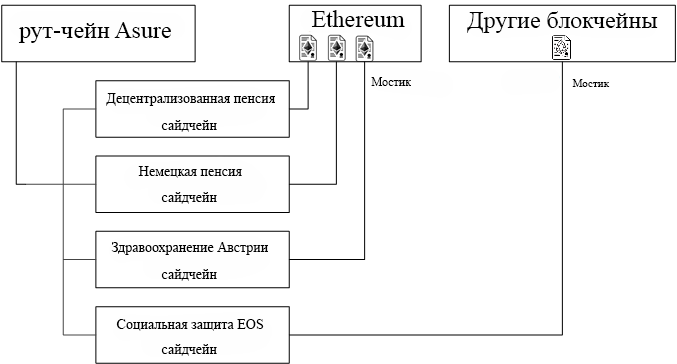
<style>
.page{position:relative;width:677px;height:364px;background:#ffffff}
.page>*{position:absolute;margin:0}
.t1{font:24px "TimesNewRomanPSMT";color:#000000}
.t2{font:12px "TimesNewRomanPSMT";color:#000000}
.t3{font:11px "TimesNewRomanPSMT";color:#000000}
.t4{font:14px "TimesNewRomanPSMT";color:#000000}
</style>
<div class="page">
<p class="t1" style="left:311px;top:10px;width:94px;height:17px">Ethereum</p>
<p class="t1" style="left:467px;top:11px;width:191px;height:22px">Другие блокчейны</p>
<p class="t1" style="left:18px;top:22px;width:153px;height:21px">рут-чейн Asure</p>
<p class="t2" style="left:371px;top:77px;width:40px;height:9px">Мостик</p>
<p class="t3" style="left:572px;top:79px;width:38px;height:8px">Мостик</p>
<p class="t4" style="left:106px;top:93px;width:169px;height:13px">Децентрализованная пенсия</p>
<p class="t4" style="left:161px;top:120px;width:56px;height:12px">сайдчейн</p>
<p class="t4" style="left:138px;top:166px;width:104px;height:12px">Немецкая пенсия</p>
<p class="t4" style="left:161px;top:192px;width:56px;height:12px">сайдчейн</p>
<p class="t4" style="left:111px;top:242px;width:157px;height:13px">Здравоохранение Австрии</p>
<p class="t4" style="left:161px;top:269px;width:56px;height:12px">сайдчейн</p>
<p class="t4" style="left:116px;top:319px;width:148px;height:12px">Социальная защита EOS</p>
<p class="t4" style="left:161px;top:344px;width:56px;height:12px">сайдчейн</p>
</div>
